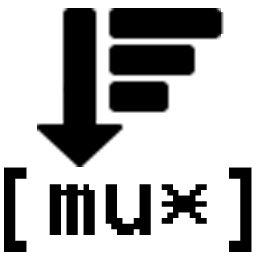
<style>
.page{position:relative;width:256px;height:256px;background:#ffffff}
.page>*{position:absolute;margin:0}
.t1{font:120px "8514oem";color:#000000}
</style>
<div class="page">
<p class="t1" style="left:4px;top:167px;width:248px;height:85px">[mu*]</p>
</div>
